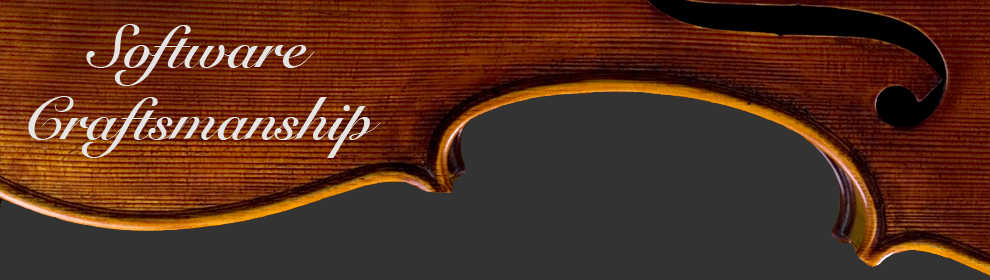
<style>
.page{position:relative;width:990px;height:280px;background:#333333}
.page>*{position:absolute;margin:0}
.t1{font:60px "SnellRoundhand-Bold";color:#e4e4e4}
</style>
<div class="page">
<p class="t1" style="left:28px;top:24px;width:353px;height:134px;text-align:center">Software <br>Craftsmanship</p>
</div>
